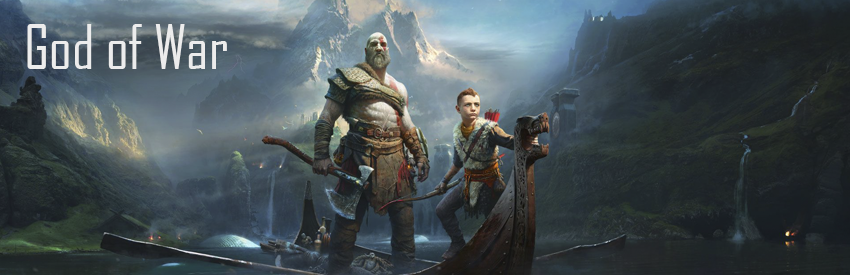
<style>
.page{position:relative;width:850px;height:275px}
.page>*{position:absolute;margin:0}
.t1{font:59.2px "AgencyFB-Reg";color:#ececec}
</style>
<div class="page">
<p class="t1" style="left:27px;top:24px;width:200px;height:45px">God of War</p>
</div>
